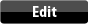
<style>
.page{position:relative;width:88px;height:24px;background:#000000}
.page>*{position:absolute;margin:0}
.t1{font:13.2px "KozGoPro-Heavy";color:#ffffff}
</style>
<div class="page">
<p class="t1" style="left:33px;top:6px;width:24px;height:11px">Edit</p>
</div>
